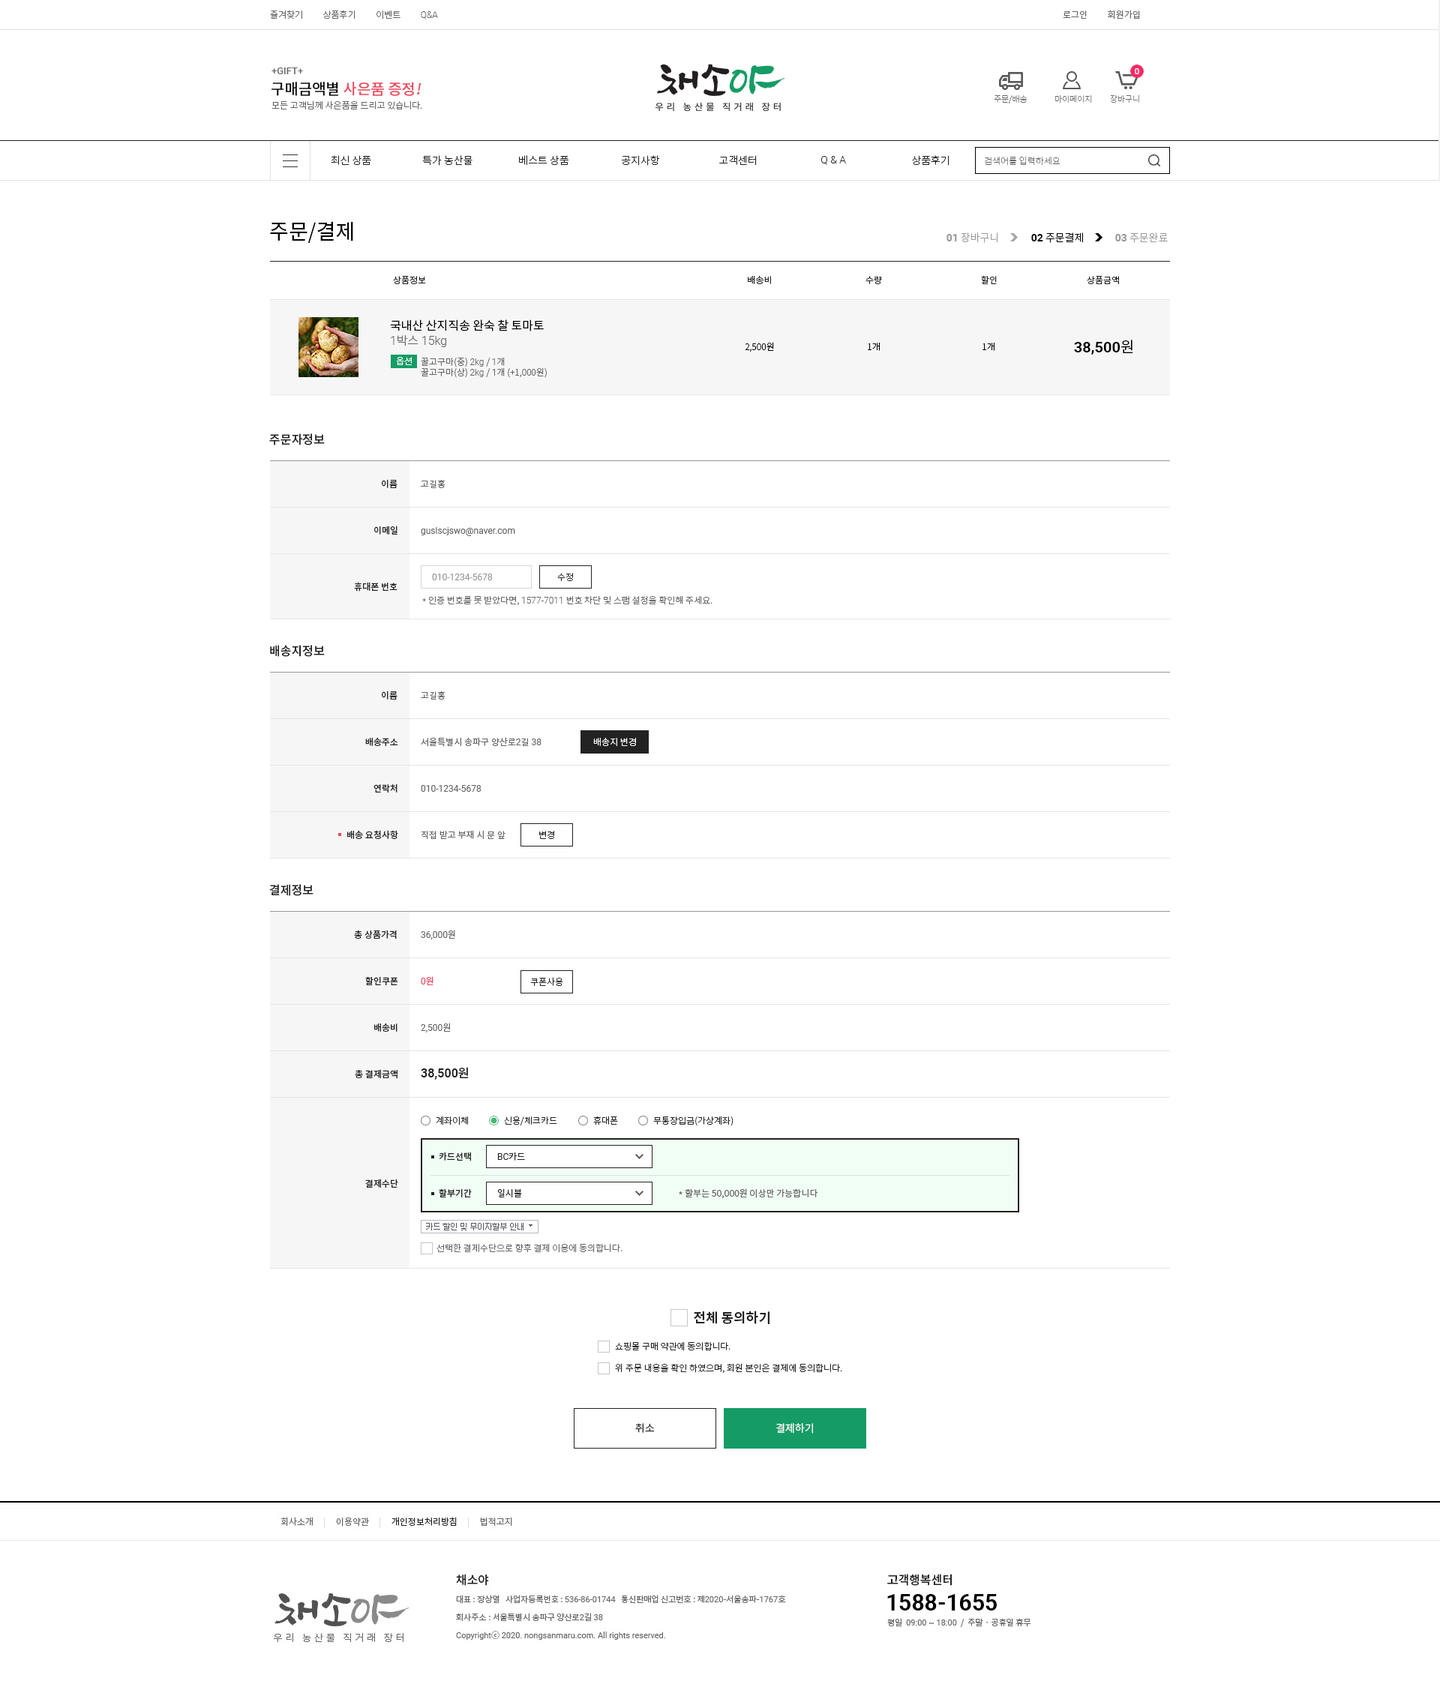
<style>
.page{position:relative;width:1440px;height:1708px;background:#ffffff}
.page>*{position:absolute;margin:0}
.t1{font:9px "NotoSansCJKkr-Light";color:#666666}
.t2{font:9px "Roboto-Light";color:#666666}
.t3{font:9px "NotoSansCJKkr-DemiLight";color:#666666}
.t4{font:9.8px "Roboto-Medium";color:#666666}
.t5{font:15px "NotoSansCJKkr-Medium";color:#ea475c}
.t6{font:15px "NotoSansCJKkr-Medium";color:#000000}
.t7{font:15px "NotoSansCJKkr-Medium";color:#ea475c;font-style:italic}
.t8{font:8.2px "NotoSansCJKkr-Thin";color:#666666}
.t9{font:10.5px "NotoSansCJKkr-Light";color:#222222}
.t10{font:10.5px "Roboto-Light";color:#222222}
.t11{font:9px "NotoSansCJKkr-Thin";color:#666666}
.t12{font:21px "NotoSansCJKkr-Regular";color:#000000}
.t13{font:10.5px "NotoSansCJKkr-Light";color:#999999}
.t14{font:10.5px "Roboto-Bold";color:#999999}
.t15{font:10.5px "NotoSansCJKkr-Light";color:#000000}
.t16{font:10.5px "Roboto-Bold";color:#000000}
.t17{font:9px "NotoSansCJKkr-Regular";color:#222222}
.t18{font:12px "NotoSansCJKkr-Regular";color:#000000}
.t19{font:12px "Roboto-Light";color:#666666}
.t20{font:12px "NotoSansCJKkr-Light";color:#666666}
.t21{font:9px "NotoSansCJKkr-Light";color:#000000}
.t22{font:15px "Roboto-Bold";color:#000000}
.t23{font:15px "NotoSansCJKkr-DemiLight";color:#000000}
.t24{font:9px "NotoSansCJKkr-Light";color:#ffffff}
.t25{font:12px "NotoSansCJKkr-Medium";color:#222222}
.t26{font:9px "NotoSansCJKkr-Medium";color:#222222}
.t27{font:9px "NotoSansCJKkr-Regular";color:#666666}
.t28{font:9px "Roboto-Regular";color:#666666}
.t29{font:9px "Roboto-Regular";color:#999999}
.t30{font:9px "NotoSansCJKkr-Light";color:#222222}
.t31{font:9px "Roboto-Regular";color:#ea475c}
.t32{font:9px "NotoSansCJKkr-Regular";color:#ea475c}
.t33{font:12px "Roboto-Bold";color:#222222}
.t34{font:9px "Roboto-Regular";color:#222222}
.t35{font:13.5px "NotoSansCJKkr-Bold";color:#222222}
.t36{font:10.5px "NotoSansCJKkr-DemiLight";color:#222222}
.t37{font:10.5px "NotoSansCJKkr-DemiLight";color:#ffffff}
</style>
<div class="page">
<p class="t1" style="left:270px;top:10px;width:168px;height:10px">즐겨찾기          상품후기          이벤트          <span class="t2">Q&amp;A</span></p>
<p class="t3" style="left:1063px;top:10px;width:77px;height:10px">로그인          회원가입</p>
<p class="t4" style="left:272px;top:68px;width:31px;height:6px">+GIFT+</p>
<p class="t5" style="left:272px;top:82px;width:150px;height:14px"><span class="t6">구매금액별 </span>사은품 증정<span class="t7">!</span></p>
<p class="t1" style="left:272px;top:100px;width:150px;height:10px">모든 고객님께 사은품을 드리고 있습니다.</p>
<p class="t8" style="left:994px;top:94px;width:34px;height:10px">주문/배송</p>
<p class="t8" style="left:1054px;top:95px;width:38px;height:9px">마이페이지</p>
<p class="t8" style="left:1110px;top:94px;width:29px;height:10px">장바구니</p>
<p class="t9" style="left:331px;top:155px;width:40px;height:10px">최신 상품</p>
<p class="t9" style="left:422px;top:155px;width:50px;height:11px">특가 농산물</p>
<p class="t9" style="left:519px;top:155px;width:50px;height:11px">베스트 상품</p>
<p class="t9" style="left:622px;top:155px;width:38px;height:11px">공지사항</p>
<p class="t9" style="left:719px;top:155px;width:38px;height:11px">고객센터</p>
<p class="t10" style="left:821px;top:156px;width:25px;height:9px">Q &amp; A</p>
<p class="t9" style="left:912px;top:155px;width:38px;height:11px">상품후기</p>
<p class="t11" style="left:984px;top:156px;width:76px;height:10px">검색어를 입력하세요</p>
<p class="t12" style="left:270px;top:221px;width:83px;height:22px">주문/결제</p>
<p class="t13" style="left:946px;top:232px;width:52px;height:11px"><span class="t14">01</span> 장바구니</p>
<p class="t15" style="left:1031px;top:232px;width:52px;height:11px"><span class="t16">02</span> 주문결제</p>
<p class="t13" style="left:1115px;top:232px;width:53px;height:11px"><span class="t14">03</span> 주문완료</p>
<p class="t17" style="left:393px;top:276px;width:33px;height:8px">상품정보</p>
<p class="t17" style="left:748px;top:275px;width:23px;height:9px">배송비</p>
<p class="t17" style="left:866px;top:276px;width:16px;height:8px">수량</p>
<p class="t17" style="left:981px;top:275px;width:16px;height:9px">할인</p>
<p class="t17" style="left:1087px;top:276px;width:32px;height:8px">상품금액</p>
<p class="t18" style="left:390px;top:320px;width:154px;height:12px">국내산 산지직송 완숙 찰 토마토</p>
<p class="t19" style="left:391px;top:335px;width:55px;height:12px">1<span class="t20">박스 </span>15kg</p>
<p class="t21" style="left:745px;top:342px;width:29px;height:10px">2,500원</p>
<p class="t21" style="left:868px;top:342px;width:12px;height:9px">1개</p>
<p class="t21" style="left:982px;top:342px;width:12px;height:9px">1개</p>
<p class="t22" style="left:1074px;top:340px;width:59px;height:15px">38,500<span class="t23">원</span></p>
<p class="t24" style="left:396px;top:357px;width:16px;height:8px">옵션</p>
<p class="t1" style="left:421px;top:357px;width:126px;height:21px">꿀고구마(중) <span class="t2">2kg</span> / <span class="t2">1</span>개<br>꿀고구마(상) <span class="t2">2kg </span>/ <span class="t2">1</span>개 (+1,000원)</p>
<p class="t25" style="left:269px;top:434px;width:56px;height:12px">주문자정보</p>
<p class="t26" style="left:382px;top:479px;width:16px;height:9px">이름</p>
<p class="t27" style="left:421px;top:480px;width:25px;height:8px">고길홍</p>
<p class="t26" style="left:374px;top:526px;width:24px;height:9px">이메일</p>
<p class="t28" style="left:421px;top:527px;width:94px;height:9px">guslscjswo@naver.com</p>
<p class="t26" style="left:354px;top:582px;width:44px;height:10px">휴대폰 번호</p>
<p class="t29" style="left:432px;top:574px;width:61px;height:6px">010-1234-5678</p>
<p class="t30" style="left:557px;top:573px;width:16px;height:8px">수정</p>
<p class="t1" style="left:422px;top:596px;width:290px;height:9px">* 인증 번호를 못 받았다면, <span class="t2">1577-7011 </span>번호 차단 및 스팸 설정을 확인해 주세요.</p>
<p class="t25" style="left:270px;top:645px;width:55px;height:12px">배송지정보</p>
<p class="t26" style="left:382px;top:691px;width:16px;height:9px">이름</p>
<p class="t27" style="left:421px;top:692px;width:25px;height:8px">고길홍</p>
<p class="t26" style="left:365px;top:737px;width:33px;height:9px">배송주소</p>
<p class="t27" style="left:421px;top:737px;width:121px;height:10px">서울특별시 송파구 양산로<span class="t28">2</span>길<span class="t28"> 38</span></p>
<p class="t24" style="left:593px;top:738px;width:43px;height:8px">배송지 변경</p>
<p class="t26" style="left:374px;top:784px;width:24px;height:9px">연락처</p>
<p class="t28" style="left:421px;top:785px;width:61px;height:7px">010-1234-5678</p>
<p class="t26" style="left:347px;top:830px;width:51px;height:9px">배송 요청사항</p>
<p class="t27" style="left:422px;top:830px;width:84px;height:9px">직접 받고 부재 시 문 앞</p>
<p class="t30" style="left:539px;top:831px;width:15px;height:8px">변경</p>
<p class="t25" style="left:269px;top:884px;width:45px;height:12px">결제정보</p>
<p class="t26" style="left:354px;top:930px;width:43px;height:9px">총 상품가격</p>
<p class="t28" style="left:421px;top:930px;width:34px;height:10px">36,000<span class="t27">원</span></p>
<p class="t26" style="left:365px;top:976px;width:33px;height:10px">할인쿠폰</p>
<p class="t31" style="left:421px;top:976px;width:13px;height:10px">0<span class="t32">원</span></p>
<p class="t30" style="left:530px;top:977px;width:33px;height:10px">쿠폰사용</p>
<p class="t26" style="left:374px;top:1023px;width:24px;height:9px">배송비</p>
<p class="t28" style="left:421px;top:1023px;width:30px;height:10px">2,500<span class="t27">원</span></p>
<p class="t26" style="left:355px;top:1070px;width:43px;height:9px">총 결제금액</p>
<p class="t33" style="left:421px;top:1067px;width:48px;height:13px">38,500<span class="t25">원</span></p>
<p class="t30" style="left:436px;top:1116px;width:32px;height:10px">계좌이체</p>
<p class="t30" style="left:504px;top:1117px;width:53px;height:9px">신용/체크카드</p>
<p class="t30" style="left:593px;top:1116px;width:25px;height:10px">휴대폰</p>
<p class="t30" style="left:653px;top:1116px;width:81px;height:10px">무통장입금(가상계좌)</p>
<p class="t26" style="left:439px;top:1152px;width:32px;height:9px">카드선택</p>
<p class="t34" style="left:497px;top:1152px;width:28px;height:9px">BC<span class="t17">카드</span></p>
<p class="t26" style="left:365px;top:1179px;width:33px;height:10px">결제수단</p>
<p class="t26" style="left:439px;top:1189px;width:33px;height:9px">할부기간</p>
<p class="t17" style="left:497px;top:1189px;width:25px;height:9px">일시불</p>
<p class="t27" style="left:679px;top:1189px;width:139px;height:10px">* 할부는 50,000원 이상만 가능합니다</p>
<p class="t1" style="left:436px;top:1244px;width:186px;height:9px">선택한 결제수단으로 향후 결제 이용에 동의합니다.</p>
<p class="t35" style="left:694px;top:1311px;width:76px;height:13px">전체 동의하기</p>
<p class="t30" style="left:615px;top:1342px;width:115px;height:10px">쇼핑몰 구매 약관에 동의합니다.</p>
<p class="t30" style="left:615px;top:1364px;width:227px;height:9px">위 주문 내용을 확인 하였으며, 회원 본인은 결제에 동의합니다.</p>
<p class="t36" style="left:635px;top:1424px;width:20px;height:9px">취소</p>
<p class="t37" style="left:776px;top:1424px;width:37px;height:10px">결제하기</p>
</div>
